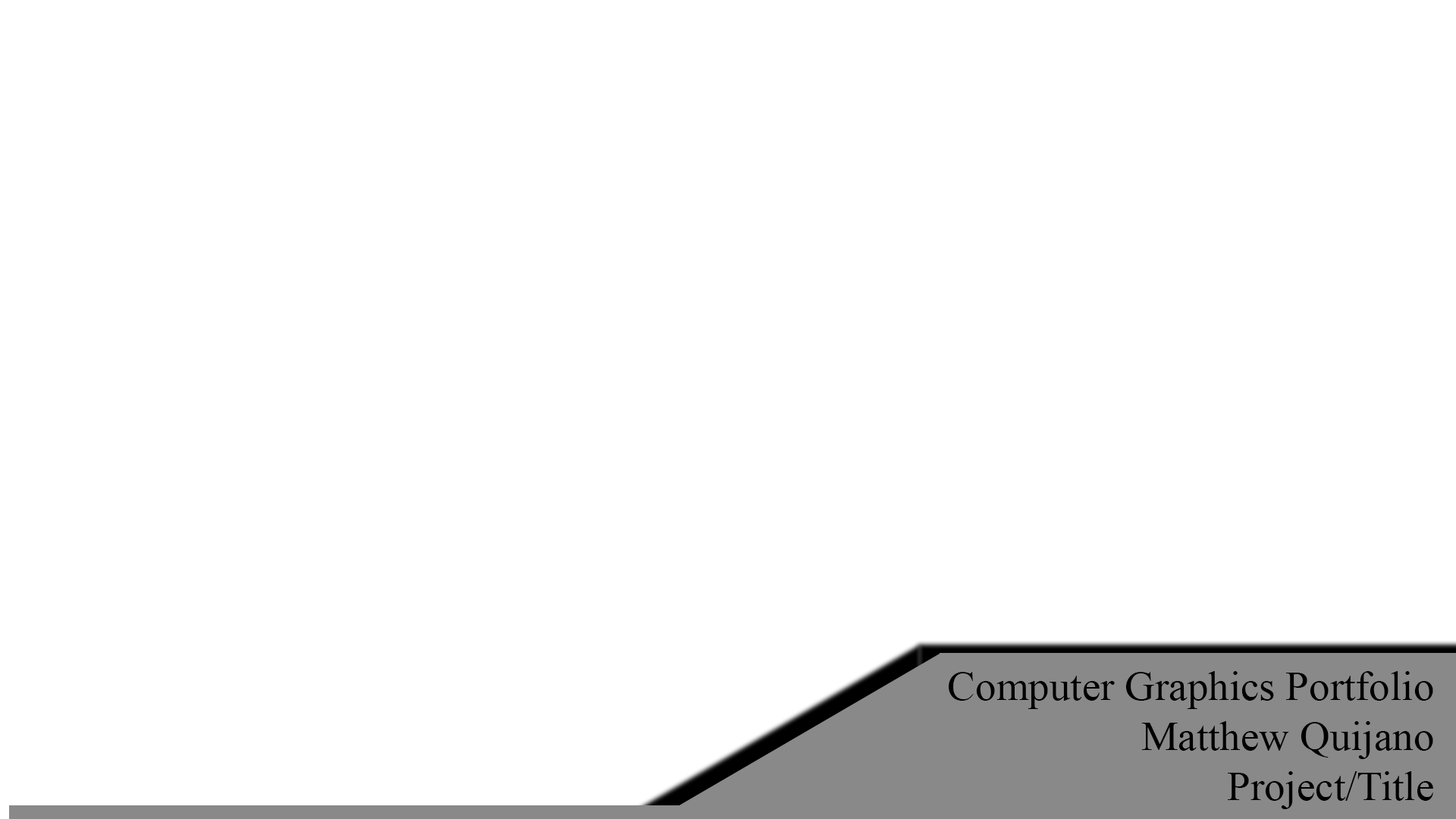
<style>
.page{position:relative;width:1456px;height:819px;background:#ffffff}
.page>*{position:absolute;margin:0}
.t1{font:41.7px "TimesNewRomanPSMT";color:#000000}
</style>
<div class="page">
<p class="t1" style="left:949px;top:671px;width:484px;height:138px;text-align:right">Computer Graphics Portfolio<br>Matthew Quijano<br>Project/Title</p>
</div>
